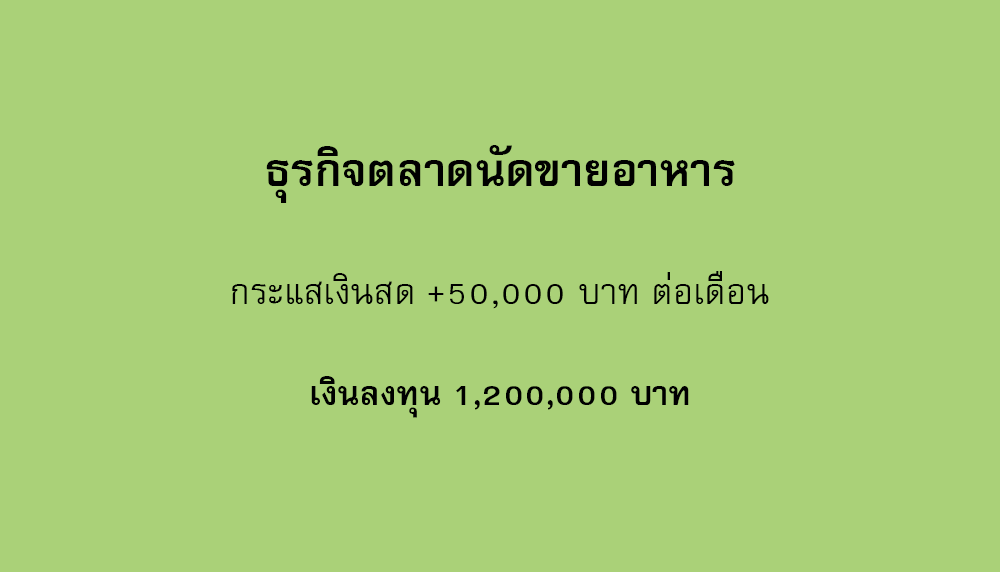
<style>
.page{position:relative;width:1000px;height:572px;background:#aad178}
.page>*{position:absolute;margin:0}
.t1{font:64px "FreesiaUPCBold";color:#000000}
.t2{font:50px "FreesiaUPC";color:#000000}
.t3{font:47px "FreesiaUPCBold";color:#000000}
</style>
<div class="page">
<p class="t1" style="left:266px;top:145px;width:469px;height:58px">ธุรกิจตลาดนัดขายอาหาร</p>
<p class="t2" style="left:232px;top:271px;width:537px;height:38px">กระแสเงินสด +50,000 บาท ต่อเดือน</p>
<p class="t3" style="left:311px;top:376px;width:378px;height:42px">เงินลงทุน 1,200,000 บาท</p>
</div>
